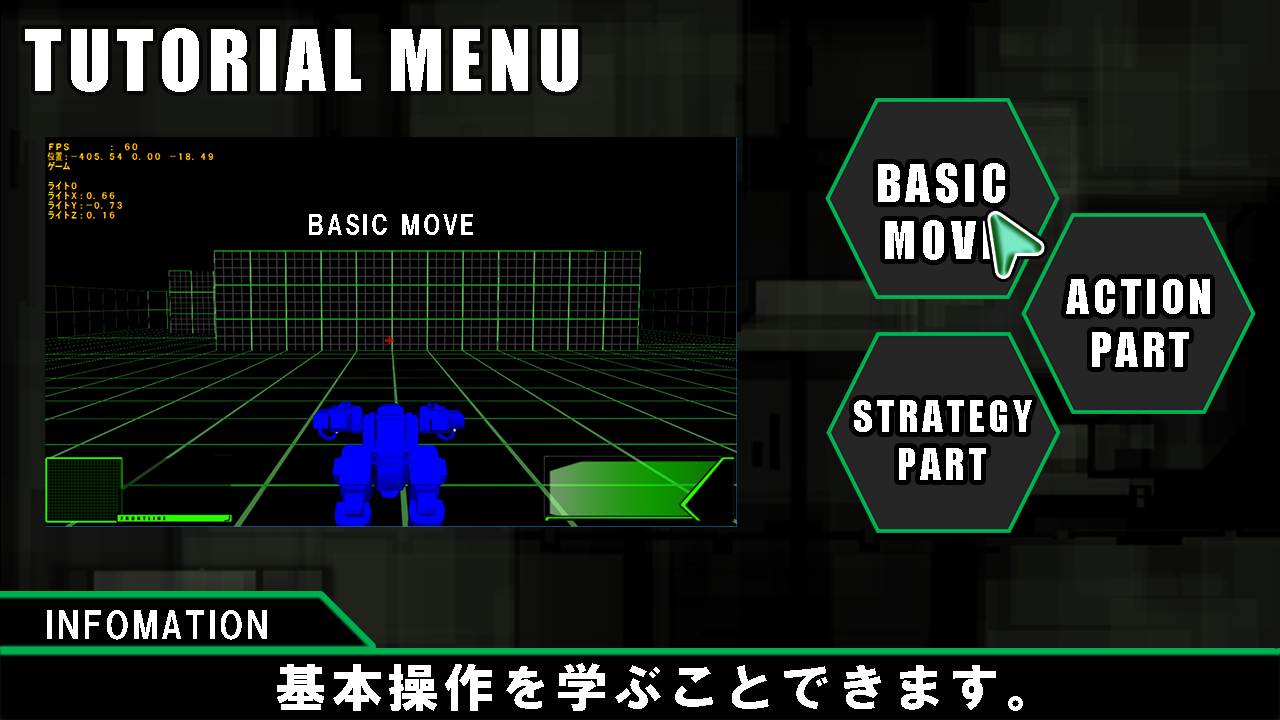
<style>
.page{position:relative;width:1280px;height:720px;background:#000000}
.page>*{position:absolute;margin:0}
.t1{font:78.3px "Impact";letter-spacing:0.08em;color:#ffffff}
.t2{font:48px "Impact";letter-spacing:0.08em;color:#ffffff}
.t3{font:26.5px "HGSSoeiKakugothicUB";letter-spacing:0.08em;color:#ffffff}
.t4{font:44px "Impact";letter-spacing:0.08em;color:#ffffff}
.t5{font:40px "Impact";letter-spacing:0.08em;color:#ffffff}
.t6{font:36px "HGSSoeiKakugothicUB";letter-spacing:0.08em;color:#ffffff}
.t7{font:52px "HGSSoeiKakugothicUB";letter-spacing:0.08em;color:#ffffff}
</style>
<div class="page">
<p class="t1" style="left:25px;top:28px;width:553px;height:64px">TUTORIAL MENU</p>
<p class="t2" style="left:878px;top:163px;width:127px;height:97px;text-align:center">BASIC<br>MOVE</p>
<p class="t3" style="left:309px;top:214px;width:164px;height:21px">BASIC MOVE</p>
<p class="t4" style="left:1066px;top:279px;width:144px;height:88px;text-align:center">ACTION<br>PART</p>
<p class="t5" style="left:854px;top:400px;width:178px;height:80px;text-align:center">STRATEGY<br>PART</p>
<p class="t6" style="left:47px;top:610px;width:220px;height:30px">INFOMATION</p>
<p class="t7" style="left:277px;top:663px;width:746px;height:48px">基本操作を学ぶことできます。</p>
</div>
